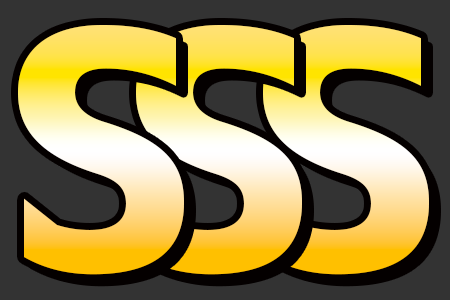
<style>
.page{position:relative;width:450px;height:300px;background:#333333}
.page>*{position:absolute;margin:0}
.t1{font:332.8px "07AkazukinPop";letter-spacing:0.08em}
</style>
<div class="page">
<p class="t1" style="left:18px;top:25px;width:166px;height:250px">S</p>
<p class="t1" style="left:136px;top:25px;width:166px;height:250px">S</p>
<p class="t1" style="left:263px;top:25px;width:166px;height:250px">S</p>
</div>
